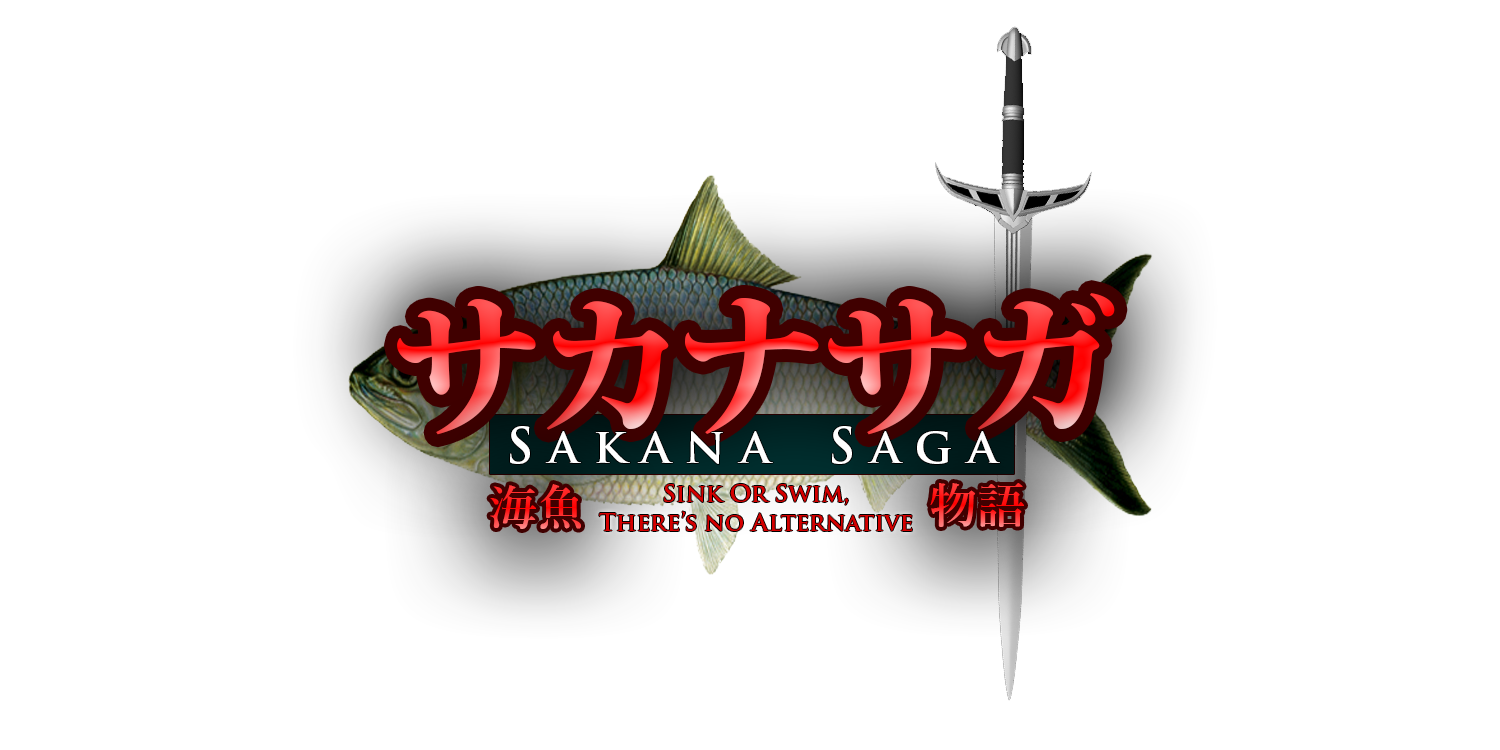
<style>
.page{position:relative;width:1500px;height:750px;background:#ffffff}
.page>*{position:absolute;margin:0}
.t1{font:155px "KozMinPr6N-Heavy"}
.t2{font:48px "TrajanPro-Bold";color:#ffffff}
.t3{font:48px "YuMincho-Demibold"}
.t4{font:24px "TrajanPro-Bold";color:#d50000}
</style>
<div class="page">
<p class="t1" style="left:397px;top:293px;width:718px;height:142px">サカナサガ</p>
<p class="t2" style="left:510px;top:426px;width:490px;height:38px">S a k a n a    S a g a</p>
<p class="t3" style="left:490px;top:484px;width:91px;height:45px">海魚</p>
<p class="t4" style="left:599px;top:484px;width:313px;height:47px;text-align:center">Sink Or Swim,<br>There’s no Alternative</p>
<p class="t3" style="left:930px;top:483px;width:94px;height:44px">物語</p>
</div>
